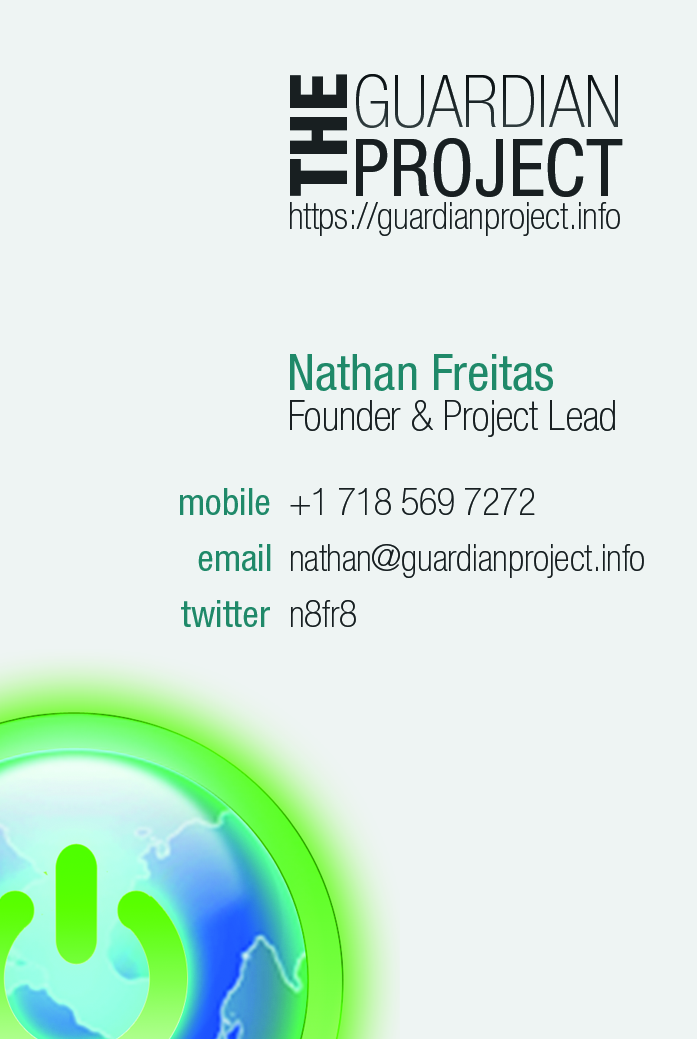
<style>
.page{position:relative;width:697px;height:1039px;background:#eef4f3}
.page>*{position:absolute;margin:0}
.t1{font:79.2px "HelveticaNeueLTStd-HvCn";color:#181f21}
.t2{font:72.9px "HelveticaNeueLTStd-ThCn";color:#181f21}
.t3{font:79.2px "HelveticaNeueLTStd-Cn";color:#181f21}
.t4{font:37.5px "HelveticaNeueLTStd-ThCn";color:#181f21}
.t5{font:50px "HelveticaNeueLTStd-Cn";color:#1f8969}
.t6{font:41.7px "HelveticaNeueLTStd-ThCn";color:#181f21}
.t7{font:37.5px "HelveticaNeueLTStd-Cn";color:#1f8969}
</style>
<div class="page">
<p class="t1" style="left:290px;top:74px;width:57px;height:122px;rotate:-90deg">THE</p>
<p class="t2" style="left:356px;top:74px;width:262px;height:54px">GUARDIAN</p>
<p class="t3" style="left:356px;top:138px;width:267px;height:59px">PROJECT</p>
<p class="t4" style="left:290px;top:202px;width:330px;height:34px">https://guardianproject.info</p>
<p class="t5" style="left:290px;top:354px;width:263px;height:37px">Nathan Freitas</p>
<p class="t6" style="left:290px;top:400px;width:325px;height:37px">Founder &amp; Project Lead</p>
<p class="t7" style="left:180px;top:488px;width:90px;height:27px">mobile</p>
<p class="t4" style="left:290px;top:488px;width:245px;height:27px">+1 718 569 7272</p>
<p class="t7" style="left:198px;top:544px;width:73px;height:27px">email</p>
<p class="t4" style="left:291px;top:544px;width:353px;height:34px">nathan@guardianproject.info</p>
<p class="t7" style="left:181px;top:600px;width:89px;height:27px">twitter</p>
<p class="t4" style="left:291px;top:600px;width:65px;height:27px">n8fr8</p>
</div>
